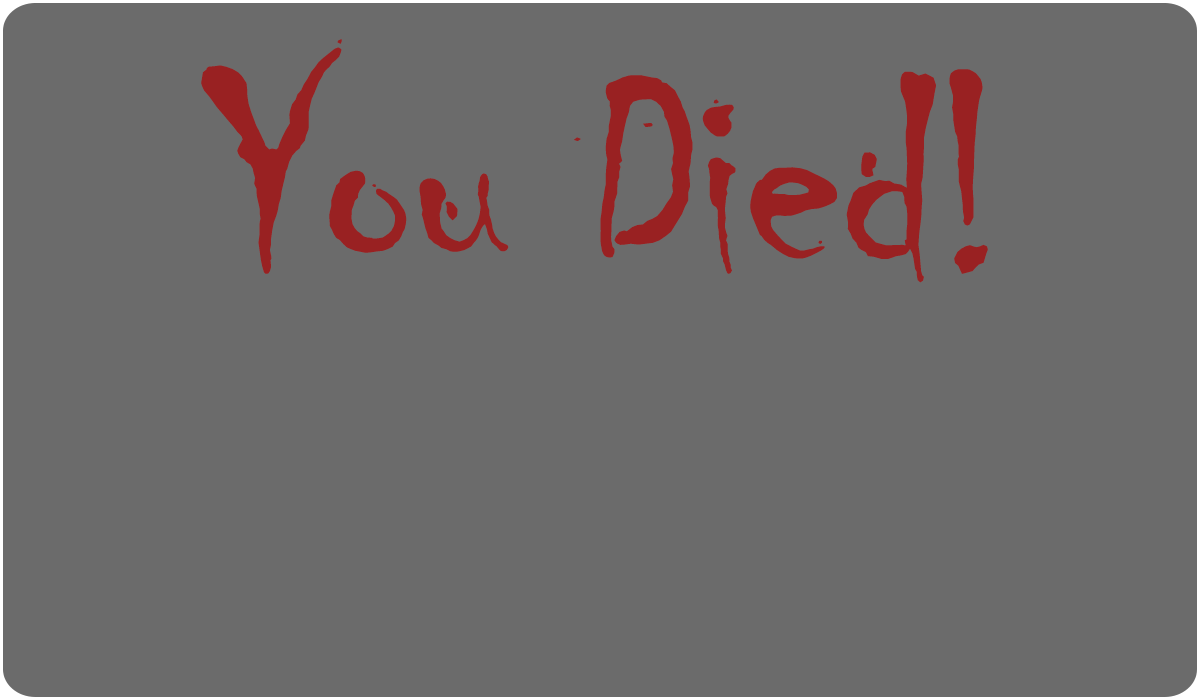
<style>
.page{position:relative;width:1200px;height:700px;background:#6b6b6b}
.page>*{position:absolute;margin:0}
.t1{font:299.8px "Chiller-Regular";letter-spacing:-0.025em;color:#992122}
</style>
<div class="page">
<p class="t1" style="left:201px;top:39px;width:787px;height:244px">You Died!</p>
</div>
